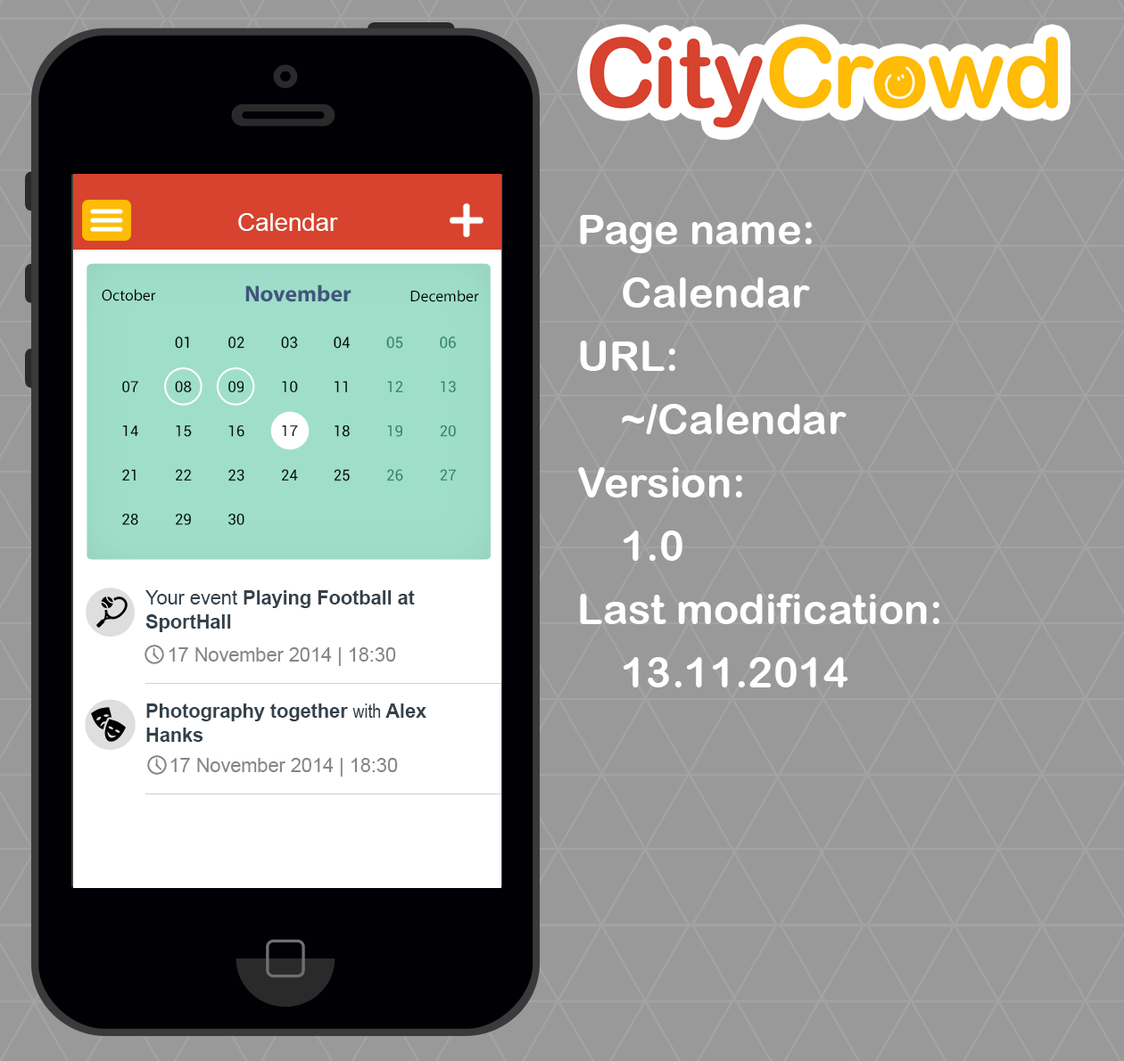
<style>
.page{position:relative;width:1124px;height:1061px;background:#999999}
.page>*{position:absolute;margin:0}
.t1{font:24.6px "ArialMT";color:#ffffff}
.t2{font:42.2px/63.3px "ArialRoundedMTBold";color:#ffffff}
.t3{font:15.8px "MyriadPro-Regular";color:#000000}
.t4{font:22.9px "MyriadPro-Bold";color:#41557d}
.t5{font:15.2px "Roboto-Regular";color:#000000}
.t6{font:15.2px "Roboto-Regular";color:#010101}
.t7{font:15.2px "Roboto-Regular";color:#34826a}
.t8{font:19.3px/24.6px "Arial-BoldMT";color:#34414b}
.t9{font:19.3px/24.6px "ArialMT";color:#34414b}
.t10{font:19.3px "ArialMT";color:#858585}
.t11{font:19.3px/24.6px "ArialNarrow";color:#34414b}
</style>
<div class="page">
<p class="t1" style="left:238px;top:213px;width:100px;height:18px">Calendar</p>
<p class="t2" style="left:578px;top:215px;width:361px;height:473px">Page name:<br>Calendar<br>URL:<br>~/Calendar<br>Version:<br>1.0<br>Last modification:<br>13.11.2014</p>
<p class="t3" style="left:102px;top:289px;width:54px;height:12px">October</p>
<p class="t4" style="left:245px;top:284px;width:106px;height:18px">November</p>
<p class="t3" style="left:410px;top:290px;width:69px;height:12px">December</p>
<p class="t5" style="left:175px;top:336px;width:14px;height:13px">01</p>
<p class="t6" style="left:228px;top:336px;width:16px;height:13px">02</p>
<p class="t5" style="left:281px;top:336px;width:17px;height:13px">03</p>
<p class="t5" style="left:334px;top:336px;width:16px;height:13px">04</p>
<p class="t7" style="left:386px;top:336px;width:17px;height:13px">05</p>
<p class="t7" style="left:440px;top:336px;width:16px;height:13px">06</p>
<p class="t5" style="left:122px;top:381px;width:16px;height:11px">07</p>
<p class="t5" style="left:175px;top:381px;width:17px;height:11px">08</p>
<p class="t5" style="left:228px;top:381px;width:15px;height:11px">09</p>
<p class="t5" style="left:282px;top:381px;width:16px;height:11px">10</p>
<p class="t5" style="left:334px;top:381px;width:13px;height:11px">11</p>
<p class="t7" style="left:387px;top:381px;width:16px;height:11px">12</p>
<p class="t7" style="left:441px;top:381px;width:15px;height:11px">13</p>
<p class="t5" style="left:122px;top:425px;width:16px;height:11px">14</p>
<p class="t5" style="left:176px;top:425px;width:16px;height:12px">15</p>
<p class="t5" style="left:228px;top:425px;width:16px;height:12px">16</p>
<p class="t5" style="left:282px;top:425px;width:16px;height:11px">17</p>
<p class="t5" style="left:334px;top:425px;width:16px;height:12px">18</p>
<p class="t7" style="left:387px;top:425px;width:15px;height:12px">19</p>
<p class="t7" style="left:441px;top:425px;width:15px;height:12px">20</p>
<p class="t5" style="left:122px;top:469px;width:14px;height:12px">21</p>
<p class="t5" style="left:176px;top:469px;width:16px;height:12px">22</p>
<p class="t5" style="left:228px;top:469px;width:16px;height:13px">23</p>
<p class="t5" style="left:282px;top:469px;width:16px;height:12px">24</p>
<p class="t6" style="left:334px;top:469px;width:16px;height:13px">25</p>
<p class="t7" style="left:387px;top:469px;width:16px;height:13px">26</p>
<p class="t7" style="left:441px;top:469px;width:15px;height:12px">27</p>
<p class="t5" style="left:122px;top:514px;width:16px;height:11px">28</p>
<p class="t5" style="left:176px;top:514px;width:15px;height:11px">29</p>
<p class="t5" style="left:228px;top:514px;width:16px;height:11px">30</p>
<p class="t8" style="left:145px;top:590px;width:270px;height:42px"><span class="t9">Your event </span>Playing Football at SportHall</p>
<p class="t10" style="left:169px;top:647px;width:227px;height:19px">17 November 2014 | 18:30</p>
<p class="t8" style="left:146px;top:704px;width:280px;height:38px">Photography together <span class="t11">with </span>Alex Hanks</p>
<p class="t10" style="left:170px;top:758px;width:228px;height:19px">17 November 2014 | 18:30</p>
</div>
